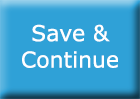
<style>
.page{position:relative;width:140px;height:99px;background:#2fa1d7}
.page>*{position:absolute;margin:0}
.t1{font:22px "Verdana";color:#ffffff}
</style>
<div class="page">
<p class="t1" style="left:22px;top:24px;width:96px;height:44px;text-align:center">Save &amp; <br>Continue</p>
</div>
